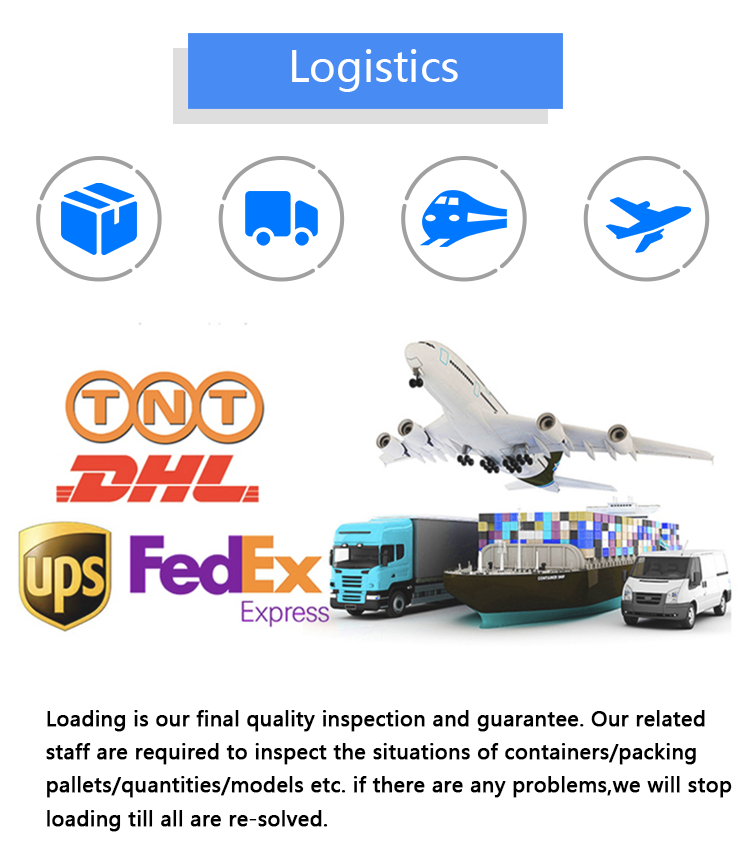
<style>
.page{position:relative;width:750px;height:865px;background:#ffffff}
.page>*{position:absolute;margin:0}
.t1{font:41.7px "MicrosoftYaHei";color:#ffffff}
.t2{font:20px/33.3px "MicrosoftYaHei";color:#000000;font-weight:bold}
</style>
<div class="page">
<p class="t1" style="left:292px;top:49px;width:166px;height:43px">Logistics</p>
<p class="t2" style="left:46px;top:710px;width:686px;height:122px">Loading is our final quality inspection and guarantee. Our related staff are required to inspect the situations of containers/packing pallets/quantities/models etc. if there are any problems,we will stop loading till all are re-solved.</p>
</div>
